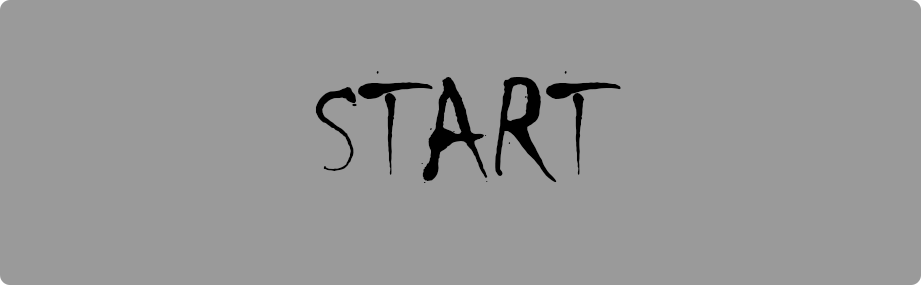
<style>
.page{position:relative;width:921px;height:285px;background:#9a9a9a}
.page>*{position:absolute;margin:0}
.t1{font:141.7px "Chiller-Regular";color:#000000}
</style>
<div class="page">
<p class="t1" style="left:315px;top:71px;width:306px;height:112px">START</p>
</div>
